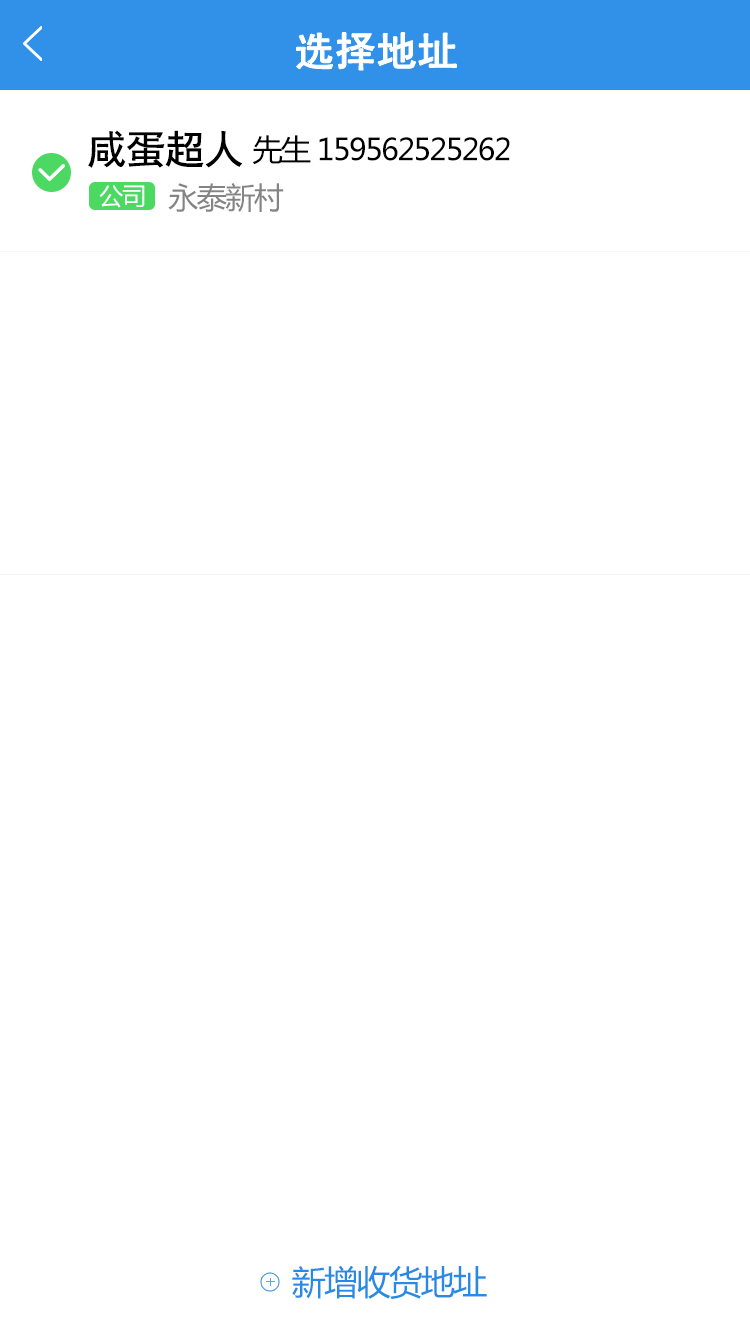
<style>
.page{position:relative;width:750px;height:1334px;background:#ffffff}
.page>*{position:absolute;margin:0}
.t1{font:40px "SimHei";color:#ffffff;font-weight:bold}
.t2{font:40px "SimHei";letter-spacing:-0.05em;color:#000000;font-weight:bold}
.t3{font:30px "MicrosoftYaHei";letter-spacing:-0.05em;color:#000000}
.t4{font:24px "MicrosoftYaHei";letter-spacing:-0.05em;color:#ffffff}
.t5{font:30px "MicrosoftYaHei";letter-spacing:-0.05em;color:#848484}
.t6{font:34px "MicrosoftYaHei";letter-spacing:-0.05em;color:#268ae6}
</style>
<div class="page">
<p class="t1" style="left:296px;top:32px;width:161px;height:38px">选择地址</p>
<p class="t2" style="left:88px;top:130px;width:154px;height:38px">咸蛋超人</p>
<p class="t3" style="left:252px;top:135px;width:258px;height:30px">先生 159562525262</p>
<p class="t4" style="left:99px;top:185px;width:46px;height:23px">公司</p>
<p class="t5" style="left:168px;top:183px;width:116px;height:29px">永泰新村</p>
<p class="t6" style="left:292px;top:1265px;width:195px;height:34px">新增收货地址</p>
</div>
